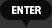
<style>
.page{position:relative;width:52px;height:28px;background:#0b0b0b}
.page>*{position:absolute;margin:0}
.t1{font:10px "KozGoPr6N-Bold";color:#ffffff}
</style>
<div class="page">
<p class="t1" style="left:12px;top:6px;width:29px;height:8px">ENTER</p>
</div>
